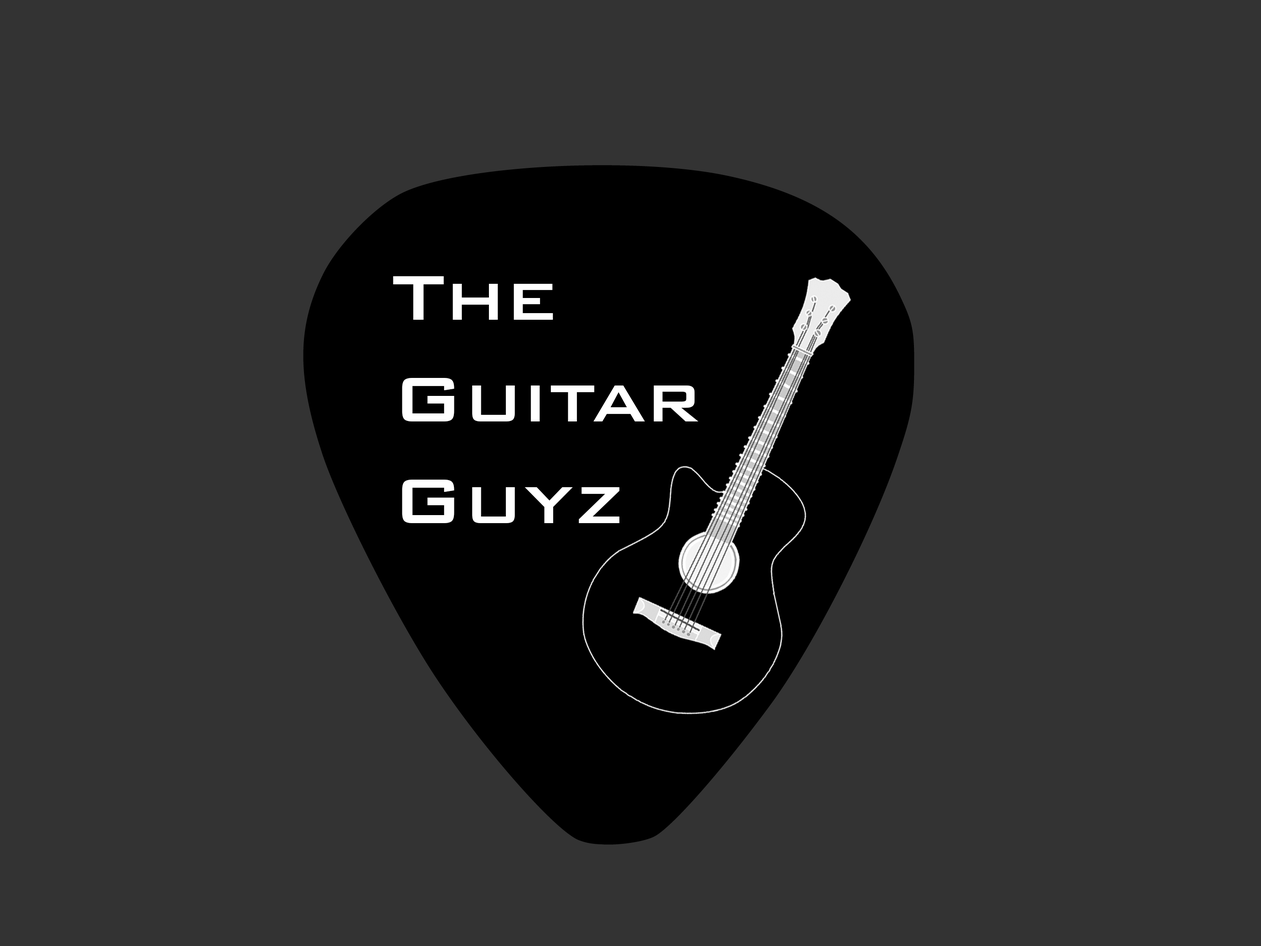
<style>
.page{position:relative;width:1261px;height:946px;background:#333333}
.page>*{position:absolute;margin:0}
.t1{font:84.7px "BankGothicBT-Medium";color:#ffffff}
</style>
<div class="page">
<p class="t1" style="left:393px;top:276px;width:305px;height:247px">The <br>Guitar <br>Guyz</p>
</div>
